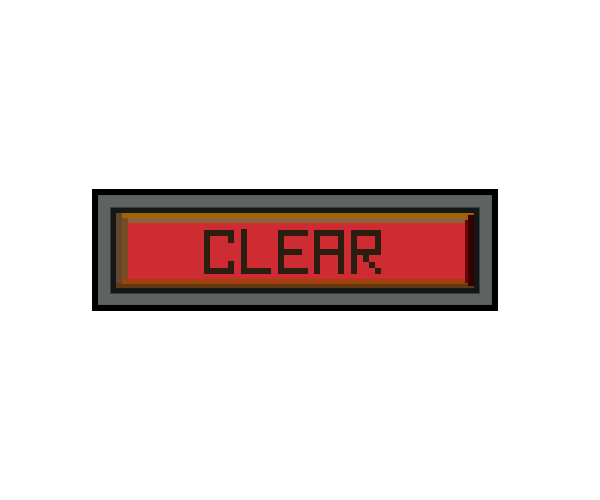
<style>
.page{position:relative;width:600px;height:500px;background:#ffffff}
.page>*{position:absolute;margin:0}
.t1{font:85.7px "14272BluemoonPixCersv.1.1";color:#2b1d10}
</style>
<div class="page">
<p class="t1" style="left:204px;top:229px;width:177px;height:45px">CLEAR</p>
</div>
